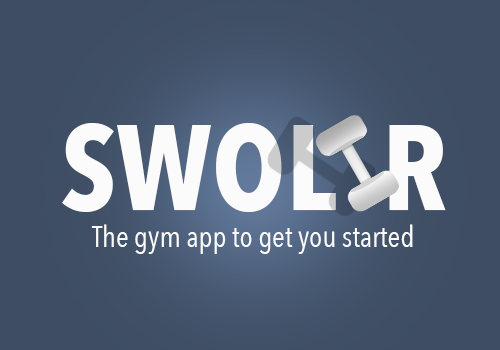
<style>
.page{position:relative;width:500px;height:350px;background:#3e4d63}
.page>*{position:absolute;margin:0}
.t1{font:120px "AvenirNextCondensed-Bold";color:#fbfbfb}
.t2{font:30px "AvenirNextCondensed-Regular";color:#fbfbfb}
</style>
<div class="page">
<p class="t1" style="left:62px;top:123px;width:384px;height:89px">SWOL  R</p>
<p class="t2" style="left:91px;top:224px;width:322px;height:30px">The gym app to get you started</p>
</div>
